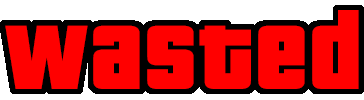
<style>
.page{position:relative;width:364px;height:100px;background:#ff0000}
.page>*{position:absolute;margin:0}
.t1{font:99px "PricedownBl-Regular";letter-spacing:0.03em;color:#ff0000}
</style>
<div class="page">
<p class="t1" style="left:5px;top:10px;width:354px;height:79px">wasted</p>
</div>
